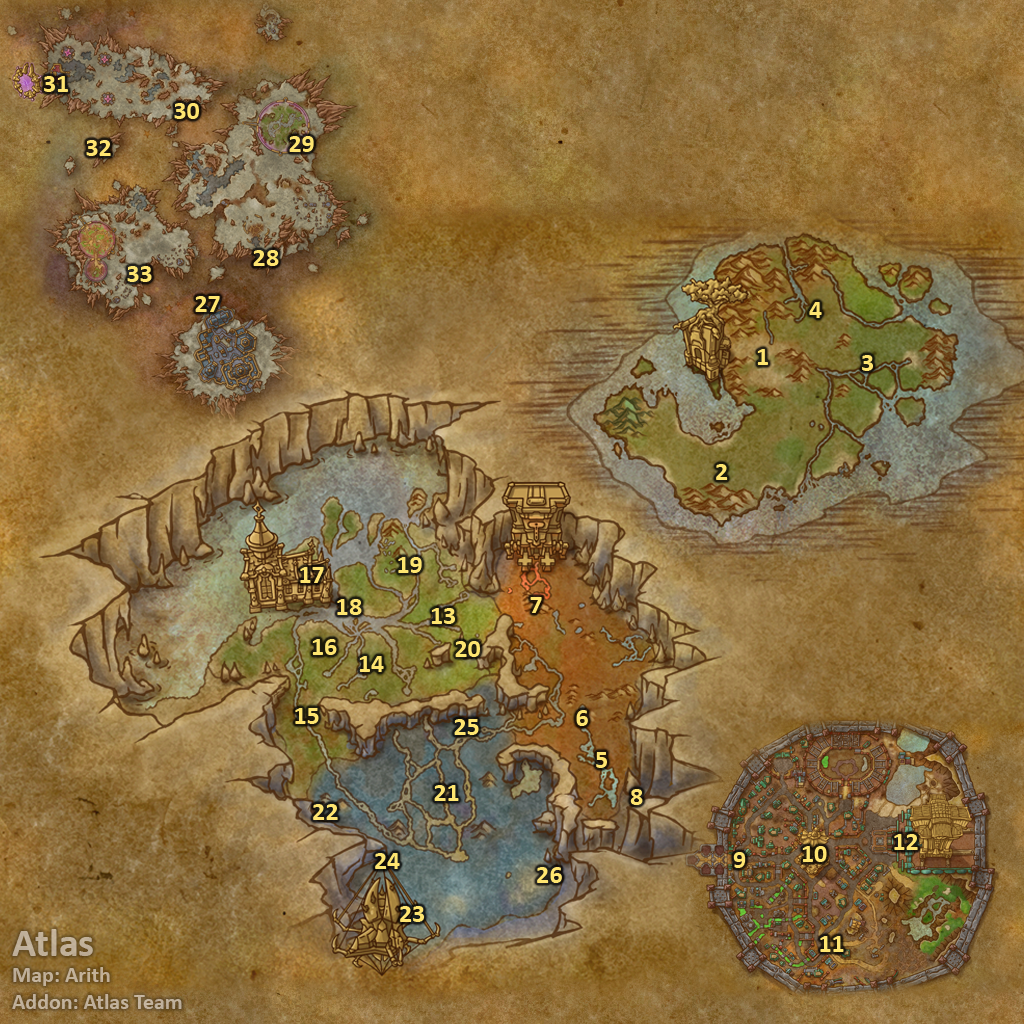
<style>
.page{position:relative;width:1024px;height:1024px}
.page>*{position:absolute;margin:0}
.t1{font:26px "Calibri-Bold";color:#fee570}
.t2{font:22px "Calibri-Bold";color:#c0b099}
.t3{font:40px "Calibri-Bold";color:#c0b099}
</style>
<div class="page">
<p class="t1" style="left:44px;top:76px;width:24px;height:16px">31</p>
<p class="t1" style="left:174px;top:103px;width:25px;height:16px">30</p>
<p class="t1" style="left:289px;top:136px;width:25px;height:16px">29</p>
<p class="t1" style="left:86px;top:140px;width:25px;height:16px">32</p>
<p class="t1" style="left:253px;top:250px;width:26px;height:16px">28</p>
<p class="t1" style="left:127px;top:266px;width:25px;height:16px">33</p>
<p class="t1" style="left:195px;top:296px;width:25px;height:16px">27</p>
<p class="t1" style="left:809px;top:302px;width:13px;height:16px">4</p>
<p class="t1" style="left:757px;top:349px;width:11px;height:16px">1</p>
<p class="t1" style="left:862px;top:355px;width:11px;height:16px">3</p>
<p class="t1" style="left:716px;top:464px;width:12px;height:16px">2</p>
<p class="t1" style="left:398px;top:557px;width:24px;height:16px">19</p>
<p class="t1" style="left:300px;top:567px;width:24px;height:16px">17</p>
<p class="t1" style="left:337px;top:599px;width:25px;height:16px">18</p>
<p class="t1" style="left:530px;top:597px;width:12px;height:16px">7</p>
<p class="t1" style="left:431px;top:608px;width:24px;height:16px">13</p>
<p class="t1" style="left:312px;top:639px;width:25px;height:16px">16</p>
<p class="t1" style="left:455px;top:641px;width:25px;height:16px">20</p>
<p class="t1" style="left:359px;top:656px;width:25px;height:16px">14</p>
<p class="t1" style="left:295px;top:708px;width:24px;height:16px">15</p>
<p class="t1" style="left:576px;top:710px;width:12px;height:16px">6</p>
<p class="t1" style="left:454px;top:719px;width:25px;height:16px">25</p>
<p class="t1" style="left:596px;top:752px;width:11px;height:16px">5</p>
<p class="t1" style="left:434px;top:785px;width:25px;height:16px">21</p>
<p class="t1" style="left:630px;top:789px;width:13px;height:16px">8</p>
<p class="t1" style="left:313px;top:804px;width:25px;height:16px">22</p>
<p class="t1" style="left:802px;top:846px;width:25px;height:16px">10</p>
<p class="t1" style="left:894px;top:834px;width:24px;height:16px">12</p>
<p class="t1" style="left:375px;top:853px;width:25px;height:16px">24</p>
<p class="t1" style="left:733px;top:852px;width:13px;height:16px">9</p>
<p class="t1" style="left:537px;top:867px;width:25px;height:16px">26</p>
<p class="t1" style="left:400px;top:906px;width:24px;height:16px">23</p>
<p class="t2" style="left:12px;top:929px;width:170px;height:80px"><span class="t3">Atlas<br></span>Map: Arith<br>Addon: Atlas Team</p>
<p class="t1" style="left:820px;top:936px;width:24px;height:16px">11</p>
</div>
